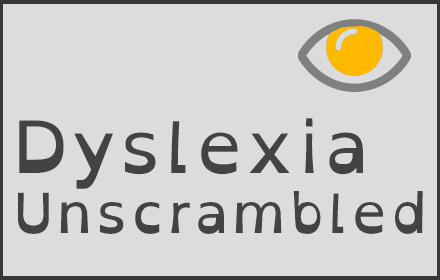
<style>
.page{position:relative;width:440px;height:280px;background:#dcdcdc}
.page>*{position:absolute;margin:0}
.t1{font:55px/10px "OpenDyslexic-Regular";letter-spacing:0.075em;color:#434343}
.t2{font:72px/10px "OpenDyslexic-Regular";letter-spacing:0.075em;color:#434343}
</style>
<div class="page">
<p class="t1" style="left:18px;top:118px;width:405px;height:116px"><span class="t2">Dyslexia<br></span>Unscrambled</p>
</div>
